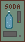
<style>
.page{position:relative;width:25px;height:42px;background:#728e7d}
.page>*{position:absolute;margin:0}
.t1{font:7px "Terminal";color:#583428}
</style>
<div class="page">
<p class="t1" style="left:5px;top:4px;width:15px;height:5px">SODA</p>
</div>
